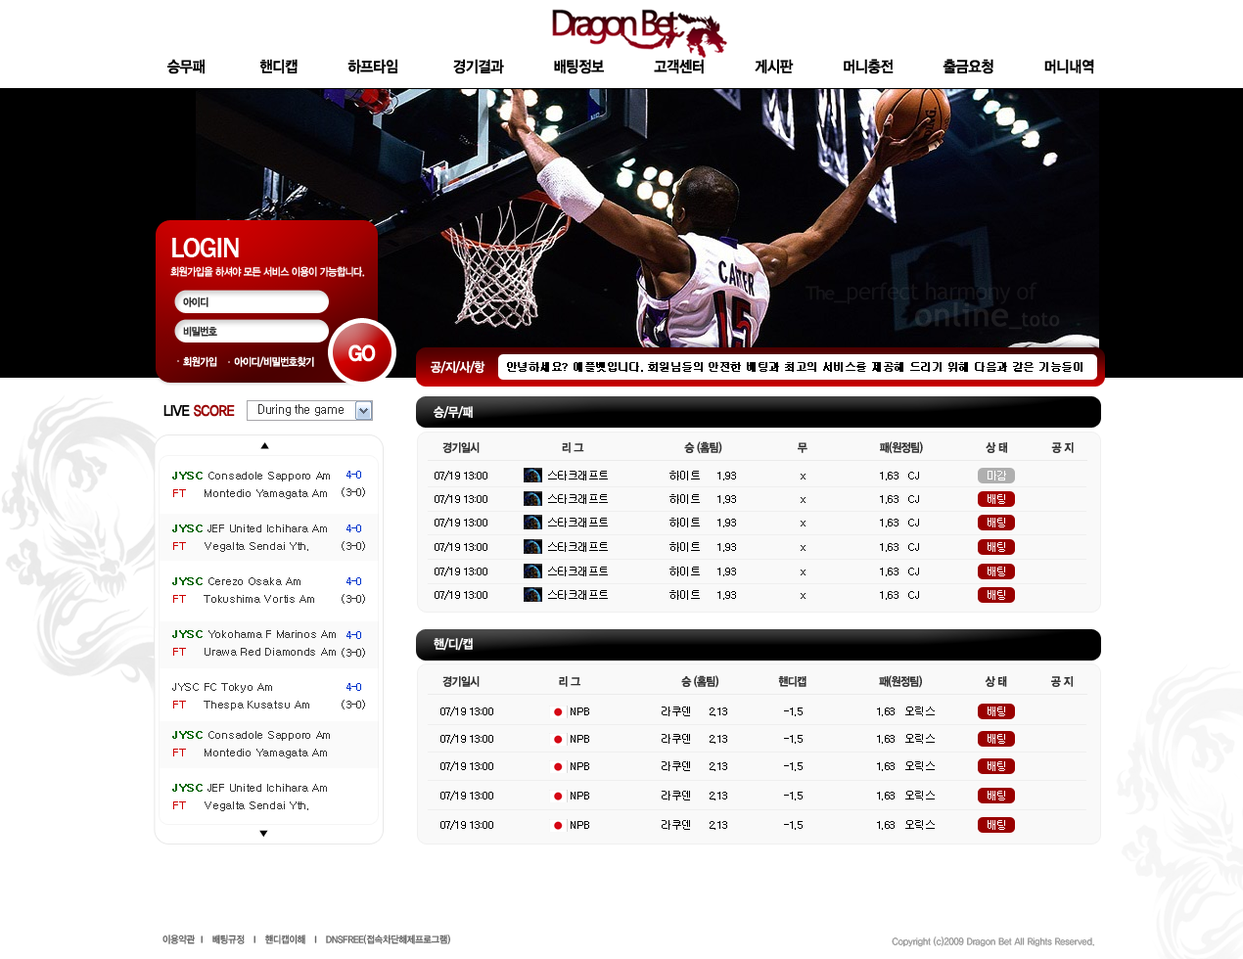
<style>
.page{position:relative;width:1243px;height:959px;background:#ffffff}
.page>*{position:absolute;margin:0}
.t1{font:15.6px "YDIYGO340";letter-spacing:-0.025em;color:#000000;scale:0.9 1}
.t2{font:28.2px "FranklinGothic-Medium";letter-spacing:-0.05em;color:#ffffff}
.t3{font:10.8px "YDIYGO340";letter-spacing:-0.05em;color:#ffffff;scale:0.9 1}
.t4{font:10.8px/29.4px "YDIYGO340";letter-spacing:-0.05em;color:#333333;scale:0.9 1}
.t5{font:21px "YDIYGO360";letter-spacing:-0.05em;color:#ffffff;scale:0.9 1}
.t6{font:12.7px "YDIYGO340";letter-spacing:-0.05em;color:#ffffff;scale:0.9 1}
.t7{font:10.8px "Gulim";letter-spacing:-0.05em;color:#000000;font-weight:bold}
.t8{font:14.7px "YDIYGO340";letter-spacing:-0.025em;color:#990000;scale:0.9 1}
.t9{font:14.7px "YDIYGO340";letter-spacing:-0.025em;color:#000000;scale:0.9 1}
.t10{font:11.7px "Gulim";letter-spacing:-0.025em;color:#333333}
.t11{font:11.7px "YDIYGO340";letter-spacing:-0.05em;color:#333333;scale:0.9 1}
.t12{font:10.8px/17.6px "Gulim";letter-spacing:-0.025em;color:#333333}
.t13{font:10.8px/17.6px "Gulim";letter-spacing:-0.025em;color:#006600;font-weight:bold}
.t14{font:10.8px/17.6px "Gulim";letter-spacing:-0.025em;color:#cc0000}
.t15{font:10.8px/17.6px "Gulim";letter-spacing:-0.025em;color:#0033cc}
.t16{font:10.8px "Gulim";letter-spacing:-0.05em;color:#000000}
.t17{font:10.8px "Gulim";letter-spacing:-0.05em;color:#ffffff}
.t18{font:9.8px "YDIYGO330";color:#666666;scale:0.9 1}
.t19{font:9.8px "YDIYGO330";color:#999999;scale:0.9 1}
</style>
<div class="page">
<p class="t1" style="left:167px;top:59px;width:927px;height:15px">승무패            핸디캡           하프타임            경기결과           배팅정보           고객센터           게시판           머니충전           출금요청           머니내역</p>
<p class="t2" style="left:172px;top:238px;width:67px;height:19px">LOGIN</p>
<p class="t3" style="left:170px;top:266px;width:195px;height:11px">회원가입을 하셔야 모든 서비스 이용이 가능합니다.</p>
<p class="t4" style="left:183px;top:297px;width:34px;height:40px">아이디<br>비밀번호</p>
<p class="t5" style="left:348px;top:345px;width:28px;height:17px">GO</p>
<p class="t3" style="left:183px;top:356px;width:131px;height:11px">회원가입      아이디/비밀번호찾기</p>
<p class="t6" style="left:431px;top:361px;width:54px;height:13px">공/지/사/항</p>
<p class="t7" style="left:507px;top:362px;width:576px;height:10px">안녕하세요? 애플뱃입니다. 회원님들의 안전한 배팅과 최고의 서비스를 제공해 드리기 위해 다음과 같은 기능들이</p>
<p class="t8" style="left:163px;top:404px;width:72px;height:13px"><span class="t9">LIVE </span>SCORE</p>
<p class="t10" style="left:258px;top:404px;width:86px;height:12px">During the game</p>
<p class="t6" style="left:434px;top:406px;width:39px;height:13px">승/무/패</p>
<p class="t11" style="left:442px;top:441px;width:632px;height:13px">경기일시                          리 그                                승 (홈팀)                        무                       패(원정팀)                    상 태              공 지</p>
<p class="t12" style="left:172px;top:472px;width:164px;height:239px"><span class="t13">JYSC</span> Consadole Sapporo Am  <br><span class="t14">FT</span>     Montedio Yamagata Am <br><br><span class="t13">JYSC</span> JEF United Ichihara Am <br><span class="t14">FT</span>     Vegalta Sendai Yth. <br><br><span class="t13">JYSC</span> Cerezo Osaka Am <br><span class="t14">FT</span>     Tokushima Vortis Am <br><br><span class="t13">JYSC</span> Yokohama F Marinos Am<br><span class="t14">FT</span>     Urawa Red Diamonds Am <br><br>JYSC FC Tokyo Am <br><span class="t14">FT</span>     Thespa Kusatsu Am</p>
<p class="t12" style="left:342px;top:471px;width:23px;height:26px;text-align:center"><span class="t15">4-0<br></span>(3-0)</p>
<p class="t16" style="left:435px;top:471px;width:484px;height:10px">07/19 13:00                  스타크래프트                  하이트     1.93                   x                      1.63   CJ</p>
<p class="t17" style="left:988px;top:471px;width:18px;height:10px">마감</p>
<p class="t16" style="left:435px;top:494px;width:484px;height:10px">07/19 13:00                  스타크래프트                  하이트     1.93                   x                      1.63   CJ</p>
<p class="t17" style="left:988px;top:494px;width:17px;height:10px">배팅</p>
<p class="t16" style="left:435px;top:518px;width:484px;height:10px">07/19 13:00                  스타크래프트                  하이트     1.93                   x                      1.63   CJ</p>
<p class="t17" style="left:988px;top:518px;width:17px;height:10px">배팅</p>
<p class="t12" style="left:342px;top:525px;width:23px;height:26px;text-align:center"><span class="t15">4-0<br></span>(3-0)</p>
<p class="t16" style="left:435px;top:542px;width:484px;height:10px">07/19 13:00                  스타크래프트                  하이트     1.93                   x                      1.63   CJ</p>
<p class="t17" style="left:988px;top:542px;width:17px;height:10px">배팅</p>
<p class="t16" style="left:435px;top:567px;width:484px;height:10px">07/19 13:00                  스타크래프트                  하이트     1.93                   x                      1.63   CJ</p>
<p class="t17" style="left:988px;top:567px;width:17px;height:10px">배팅</p>
<p class="t12" style="left:342px;top:578px;width:23px;height:26px;text-align:center"><span class="t15">4-0<br></span>(3-0)</p>
<p class="t16" style="left:435px;top:590px;width:484px;height:10px">07/19 13:00                  스타크래프트                  하이트     1.93                   x                      1.63   CJ</p>
<p class="t17" style="left:988px;top:590px;width:17px;height:10px">배팅</p>
<p class="t12" style="left:342px;top:631px;width:23px;height:27px;text-align:center"><span class="t15">4-0<br></span>(3-0)</p>
<p class="t6" style="left:434px;top:638px;width:39px;height:13px">핸/디/캡</p>
<p class="t11" style="left:442px;top:675px;width:631px;height:13px">경기일시                         리 그                                승 (홈팀)                   핸디캡                       패(원정팀)                    상 태              공 지</p>
<p class="t12" style="left:342px;top:683px;width:23px;height:27px;text-align:center"><span class="t15">4-0<br></span>(3-0)</p>
<p class="t16" style="left:440px;top:707px;width:495px;height:9px">07/19 13:00                       NPB                     라쿠덴     2.13                 -1.5                      1.63   오릭스</p>
<p class="t17" style="left:988px;top:707px;width:17px;height:9px">배팅</p>
<p class="t12" style="left:172px;top:731px;width:158px;height:80px"><span class="t13">JYSC</span> Consadole Sapporo Am  <br><span class="t14">FT</span>     Montedio Yamagata Am <br><br><span class="t13">JYSC</span> JEF United Ichihara Am <br><span class="t14">FT</span>     Vegalta Sendai Yth.</p>
<p class="t16" style="left:440px;top:734px;width:495px;height:10px">07/19 13:00                       NPB                     라쿠덴     2.13                 -1.5                      1.63   오릭스</p>
<p class="t17" style="left:988px;top:734px;width:17px;height:10px">배팅</p>
<p class="t16" style="left:440px;top:762px;width:495px;height:9px">07/19 13:00                       NPB                     라쿠덴     2.13                 -1.5                      1.63   오릭스</p>
<p class="t17" style="left:988px;top:762px;width:17px;height:9px">배팅</p>
<p class="t16" style="left:440px;top:791px;width:495px;height:10px">07/19 13:00                       NPB                     라쿠덴     2.13                 -1.5                      1.63   오릭스</p>
<p class="t17" style="left:988px;top:791px;width:17px;height:10px">배팅</p>
<p class="t16" style="left:440px;top:820px;width:495px;height:10px">07/19 13:00                       NPB                     라쿠덴     2.13                 -1.5                      1.63   오릭스</p>
<p class="t17" style="left:988px;top:820px;width:17px;height:10px">배팅</p>
<p class="t18" style="left:162px;top:935px;width:288px;height:10px">이용약관  l   배팅규정   l   핸디캡이해   l   DNSFREE(접속차단해제프로그램)</p>
<p class="t19" style="left:892px;top:937px;width:202px;height:10px">Copyright (c)2009 Dragon Bet All Rights Reserved.</p>
</div>
